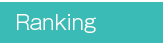
<style>
.page{position:relative;width:165px;height:50px;background:#3abbb6}
.page>*{position:absolute;margin:0}
.t1{font:20px "GothicMB101Pro-Light";color:#fbfbf9}
</style>
<div class="page">
<p class="t1" style="left:17px;top:14px;width:79px;height:19px">Ranking</p>
</div>
